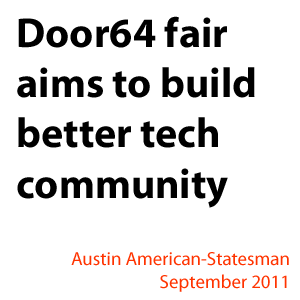
<style>
.page{position:relative;width:300px;height:300px;background:#ffffff}
.page>*{position:absolute;margin:0}
.t1{font:41.8px "MyriadPro-Bold";color:#000000}
.t2{font:18.9px "MyriadPro-Regular";color:#ff3300}
</style>
<div class="page">
<p class="t1" style="left:17px;top:16px;width:238px;height:192px">Door64 fair <br>aims to build <br>better tech <br>community</p>
<p class="t2" style="left:71px;top:252px;width:218px;height:40px;text-align:right">Austin American-Statesman<br>September 2011</p>
</div>
